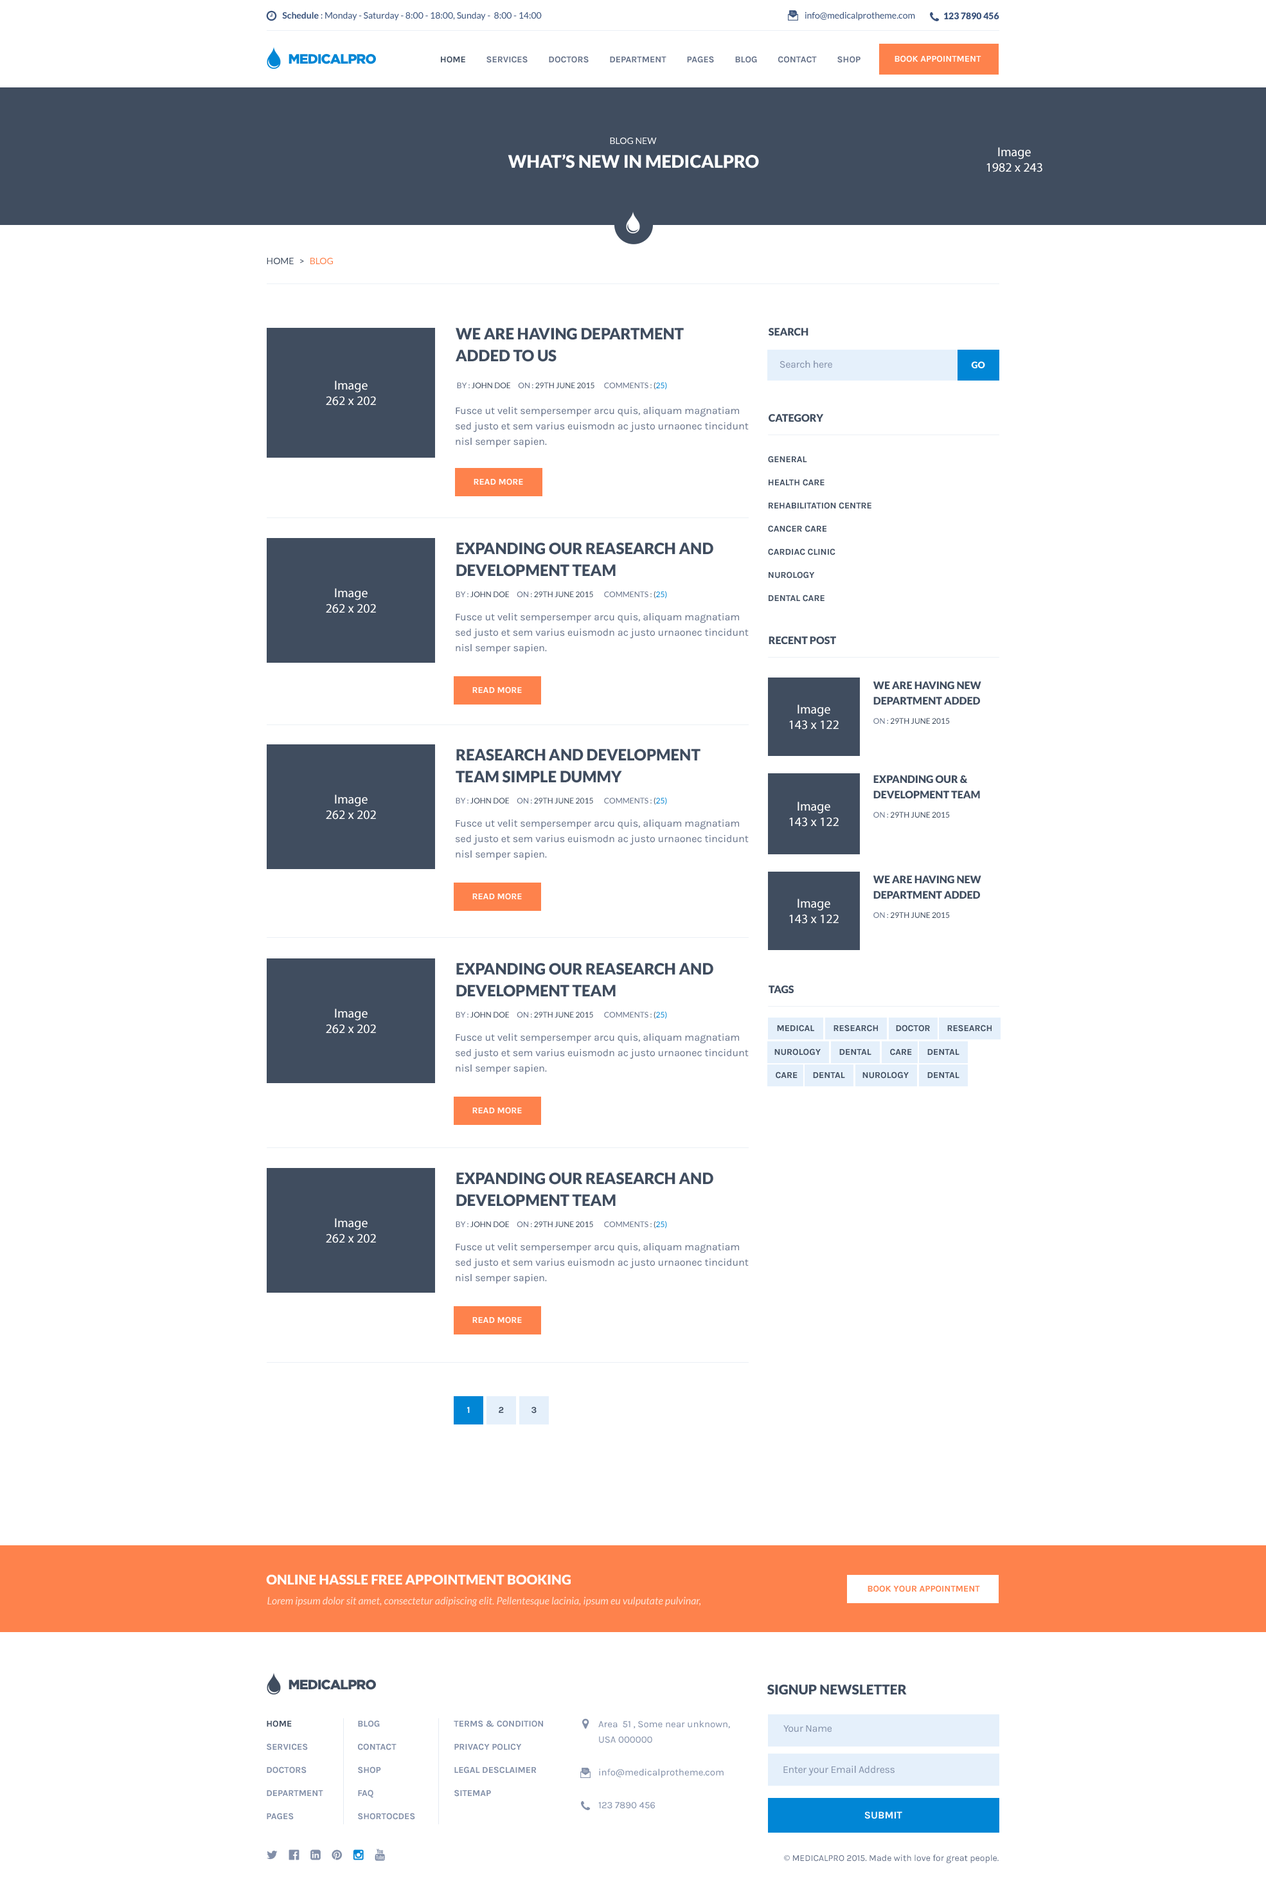
<style>
.page{position:relative;width:1266px;height:1904px;background:#ffffff}
.page>*{position:absolute;margin:0}
.t1{font:9px "Lato-Regular";color:#39527b}
.t2{font:9px "Lato-Bold";color:#39527b}
.t3{font:9px "Lato-Black";color:#39527b;text-transform:uppercase}
.t4{font:13.5px "Gotham-Black";letter-spacing:-0.05em;color:#0186d5;text-transform:uppercase}
.t5{font:9px "Karla-Bold";color:#657188;text-transform:uppercase}
.t6{font:9px "Karla-Bold";color:#404d5f;text-transform:uppercase}
.t7{font:9px "Karla-Bold";color:#ffffff;text-transform:uppercase}
.t8{font:9px "Lato-Regular";color:#ffffff;text-transform:uppercase}
.t9{font:12.9px "MyriadPro-Regular";color:#ffffff}
.t10{font:17.4px "Lato-Black";color:#ffffff;text-transform:uppercase}
.t11{font:9px "Lato-Regular";color:#404d5f;text-transform:uppercase}
.t12{font:9px "Lato-Regular";color:#fe824c;text-transform:uppercase}
.t13{font:15.4px/21.9px "Lato-Black";color:#404d5f;text-transform:uppercase}
.t14{font:10.3px "Lato-Black";color:#404d5f;text-transform:uppercase}
.t15{font:10.3px "Karla-Regular";letter-spacing:-0.025em;color:#828fa8}
.t16{font:9px "Lato-Black";color:#ffffff;text-transform:uppercase}
.t17{font:7.7px "Lato-Regular";color:#404d5f;text-transform:uppercase}
.t18{font:7.7px "Lato-Regular";color:#657188;text-transform:uppercase}
.t19{font:7.7px "Lato-Regular";color:#0385d2;text-transform:uppercase}
.t20{font:10.3px/15.4px "Karla-Regular";color:#657188}
.t21{font:9px/23.1px "Karla-Bold";color:#404d5f;text-transform:uppercase}
.t22{font:10.3px/15.4px "Lato-Black";color:#404d5f;text-transform:uppercase}
.t23{font:13.5px "Lato-Black";color:#ffffff;text-transform:uppercase}
.t24{font:9px "Karla-Bold";color:#fe824c;text-transform:uppercase}
.t25{font:10.3px "Lato-Italic";color:#ffe2d5}
.t26{font:13.5px "Gotham-Black";letter-spacing:-0.05em;color:#404d5f;text-transform:uppercase}
.t27{font:13.5px "Lato-Black";color:#404d5f;text-transform:uppercase}
.t28{font:9px/23.1px "Karla-Bold";color:#828fa8;text-transform:uppercase}
.t29{font:9.6px/15.4px "Karla-Regular";color:#828fa8}
.t30{font:9.6px "Karla-Regular";color:#828fa8}
.t31{font:9.6px "Karla-Regular";color:#828fa8;text-transform:uppercase}
.t32{font:10.3px "Karla-Bold";color:#ffffff;text-transform:uppercase}
.t33{font:9px "Karla-Regular";color:#657188}
.t34{font:9px "MyriadPro-Regular";color:#657188}
</style>
<div class="page">
<p class="t1" style="left:282px;top:12px;width:260px;height:9px"><span class="t2">Schedule</span> : Monday - Saturday - 8:00 - 18:00, Sunday -  8:00 - 14:00</p>
<p class="t1" style="left:806px;top:12px;width:109px;height:9px">info@medicalprotheme.com</p>
<p class="t3" style="left:944px;top:12px;width:56px;height:7px">123 7890 456</p>
<p class="t4" style="left:289px;top:54px;width:87px;height:10px">MEDICALPRO</p>
<p class="t5" style="left:441px;top:56px;width:420px;height:7px"><span class="t6">Home</span>         Services         Doctors         DEPARTMENT         Pages         Blog         Contact         Shop</p>
<p class="t7" style="left:895px;top:55px;width:87px;height:7px">BOOK APPOINTMENT</p>
<p class="t8" style="left:610px;top:138px;width:47px;height:6px">blog new</p>
<p class="t9" style="left:987px;top:147px;width:56px;height:25px;text-align:center">Image<br>1982 x 243</p>
<p class="t10" style="left:508px;top:154px;width:251px;height:14px">What’s new in medicalpro</p>
<p class="t11" style="left:267px;top:258px;width:66px;height:6px">home   &gt;   <span class="t12">blog</span></p>
<p class="t13" style="left:456px;top:328px;width:228px;height:34px">We are having department<br>added to us</p>
<p class="t14" style="left:769px;top:328px;width:40px;height:8px">search</p>
<p class="t15" style="left:780px;top:361px;width:53px;height:7px">Search here</p>
<p class="t16" style="left:971px;top:361px;width:15px;height:7px">go</p>
<p class="t9" style="left:326px;top:381px;width:50px;height:25px;text-align:center">Image<br>262 x 202</p>
<p class="t17" style="left:457px;top:382px;width:138px;height:6px"><span class="t18">By :</span> John Doe     <span class="t18">on :</span> 29th June 2015</p>
<p class="t18" style="left:604px;top:382px;width:63px;height:8px">comments :<span class="t17"> (</span><span class="t19">25)</span></p>
<p class="t20" style="left:456px;top:407px;width:293px;height:40px">Fusce ut velit sempersemper arcu quis, aliquam magnatiam sed justo et sem varius euismodn ac justo urnaonec tincidunt nisl semper sapien.</p>
<p class="t14" style="left:769px;top:414px;width:55px;height:8px">category</p>
<p class="t21" style="left:768px;top:456px;width:104px;height:146px">General <br>Health Care<br>Rehabilitation Centre<br>Cancer Care<br>Cardiac Clinic<br>Nurology<br>Dental Care</p>
<p class="t7" style="left:474px;top:478px;width:49px;height:7px">read more</p>
<p class="t13" style="left:456px;top:543px;width:258px;height:34px">EXPANDING our Reasearch and<br>Development team</p>
<p class="t9" style="left:326px;top:588px;width:50px;height:25px;text-align:center">Image<br>262 x 202</p>
<p class="t17" style="left:456px;top:591px;width:137px;height:6px"><span class="t18">By :</span> John Doe     <span class="t18">on :</span> 29th June 2015</p>
<p class="t18" style="left:604px;top:591px;width:63px;height:7px">comments :<span class="t17"> (</span><span class="t19">25)</span></p>
<p class="t20" style="left:456px;top:613px;width:293px;height:41px">Fusce ut velit sempersemper arcu quis, aliquam magnatiam sed justo et sem varius euismodn ac justo urnaonec tincidunt nisl semper sapien.</p>
<p class="t14" style="left:769px;top:636px;width:67px;height:8px">recent post</p>
<p class="t7" style="left:473px;top:687px;width:49px;height:7px">read more</p>
<p class="t22" style="left:873px;top:681px;width:109px;height:24px">We are having new <br>department added</p>
<p class="t9" style="left:789px;top:705px;width:50px;height:25px;text-align:center">Image<br>143 x 122</p>
<p class="t17" style="left:874px;top:718px;width:76px;height:6px"><span class="t18">on :</span> 29th June 2015</p>
<p class="t13" style="left:456px;top:749px;width:245px;height:34px">Reasearch and Development <br>team simple dummy</p>
<p class="t22" style="left:874px;top:775px;width:106px;height:23px">EXPANDING our &amp;<br>Development team</p>
<p class="t9" style="left:326px;top:795px;width:50px;height:25px;text-align:center">Image<br>262 x 202</p>
<p class="t17" style="left:456px;top:798px;width:137px;height:6px"><span class="t18">By :</span> John Doe     <span class="t18">on :</span> 29th June 2015</p>
<p class="t18" style="left:604px;top:797px;width:63px;height:8px">comments :<span class="t17"> (</span><span class="t19">25)</span></p>
<p class="t9" style="left:789px;top:802px;width:50px;height:25px;text-align:center">Image<br>143 x 122</p>
<p class="t20" style="left:456px;top:820px;width:293px;height:40px">Fusce ut velit sempersemper arcu quis, aliquam magnatiam sed justo et sem varius euismodn ac justo urnaonec tincidunt nisl semper sapien.</p>
<p class="t17" style="left:874px;top:812px;width:76px;height:6px"><span class="t18">on :</span> 29th June 2015</p>
<p class="t22" style="left:873px;top:876px;width:109px;height:23px">We are having new <br>department added</p>
<p class="t7" style="left:473px;top:893px;width:49px;height:7px">read more</p>
<p class="t9" style="left:789px;top:899px;width:50px;height:25px;text-align:center">Image<br>143 x 122</p>
<p class="t17" style="left:874px;top:912px;width:76px;height:6px"><span class="t18">on :</span> 29th June 2015</p>
<p class="t13" style="left:456px;top:963px;width:258px;height:34px">EXPANDING our Reasearch and<br>Development team</p>
<p class="t14" style="left:769px;top:986px;width:25px;height:7px">tags</p>
<p class="t9" style="left:326px;top:1009px;width:50px;height:25px;text-align:center">Image<br>262 x 202</p>
<p class="t17" style="left:456px;top:1012px;width:137px;height:6px"><span class="t18">By :</span> John Doe     <span class="t18">on :</span> 29th June 2015</p>
<p class="t18" style="left:604px;top:1011px;width:63px;height:8px">comments :<span class="t17"> (</span><span class="t19">25)</span></p>
<p class="t6" style="left:777px;top:1025px;width:38px;height:7px">medical</p>
<p class="t6" style="left:834px;top:1025px;width:44px;height:7px">research</p>
<p class="t6" style="left:896px;top:1025px;width:34px;height:7px">doctor</p>
<p class="t6" style="left:948px;top:1025px;width:44px;height:7px">research</p>
<p class="t20" style="left:456px;top:1034px;width:293px;height:40px">Fusce ut velit sempersemper arcu quis, aliquam magnatiam sed justo et sem varius euismodn ac justo urnaonec tincidunt nisl semper sapien.</p>
<p class="t6" style="left:775px;top:1048px;width:46px;height:8px">Nurology</p>
<p class="t6" style="left:840px;top:1049px;width:32px;height:6px">Dental</p>
<p class="t6" style="left:890px;top:1048px;width:22px;height:8px">care</p>
<p class="t6" style="left:928px;top:1049px;width:32px;height:6px">Dental</p>
<p class="t6" style="left:776px;top:1072px;width:22px;height:7px">care</p>
<p class="t6" style="left:813px;top:1072px;width:32px;height:6px">Dental</p>
<p class="t6" style="left:863px;top:1072px;width:46px;height:7px">Nurology</p>
<p class="t6" style="left:928px;top:1072px;width:32px;height:6px">Dental</p>
<p class="t7" style="left:473px;top:1107px;width:49px;height:7px">read more</p>
<p class="t13" style="left:456px;top:1173px;width:258px;height:34px">EXPANDING our Reasearch and<br>Development team</p>
<p class="t9" style="left:326px;top:1218px;width:50px;height:25px;text-align:center">Image<br>262 x 202</p>
<p class="t17" style="left:456px;top:1221px;width:137px;height:6px"><span class="t18">By :</span> John Doe     <span class="t18">on :</span> 29th June 2015</p>
<p class="t18" style="left:604px;top:1221px;width:63px;height:7px">comments :<span class="t17"> (</span><span class="t19">25)</span></p>
<p class="t20" style="left:456px;top:1243px;width:293px;height:41px">Fusce ut velit sempersemper arcu quis, aliquam magnatiam sed justo et sem varius euismodn ac justo urnaonec tincidunt nisl semper sapien.</p>
<p class="t7" style="left:473px;top:1317px;width:49px;height:7px">read more</p>
<p class="t7" style="left:467px;top:1407px;width:3px;height:6px">1</p>
<p class="t6" style="left:499px;top:1407px;width:5px;height:6px">2</p>
<p class="t6" style="left:532px;top:1407px;width:5px;height:7px">3</p>
<p class="t23" style="left:266px;top:1574px;width:305px;height:11px">ONLINE HASSLE FREE Appointment BOOKING</p>
<p class="t24" style="left:868px;top:1585px;width:112px;height:7px">BOOK YOUR APPOINTMENT</p>
<p class="t25" style="left:267px;top:1597px;width:434px;height:10px">Lorem ipsum dolor sit amet, consectetur adipiscing elit. Pellentesque lacinia, ipsum eu vulputate pulvinar,</p>
<p class="t26" style="left:289px;top:1680px;width:87px;height:10px">MEDICALPRO</p>
<p class="t27" style="left:768px;top:1684px;width:139px;height:11px">SIGNUP NEWSLETTER</p>
<p class="t28" style="left:267px;top:1720px;width:56px;height:100px"><span class="t21">Home<br></span>Services<br>Doctors<br>DEPARTMENT<br>Pages</p>
<p class="t28" style="left:358px;top:1720px;width:57px;height:100px">Blog<br>Contact<br>Shop<br>faq<br>shortocdes</p>
<p class="t28" style="left:454px;top:1720px;width:89px;height:77px">TERms &amp; Condition<br>Privacy policy<br>Legal desclaimer<br>sitemap</p>
<p class="t29" style="left:598px;top:1720px;width:132px;height:23px">Area  51 , Some near unknown, <br>USA 000000</p>
<p class="t15" style="left:784px;top:1725px;width:48px;height:8px">Your Name</p>
<p class="t30" style="left:599px;top:1769px;width:125px;height:9px">info@medicalprotheme.com</p>
<p class="t15" style="left:784px;top:1766px;width:111px;height:10px">Enter your Email Address</p>
<p class="t31" style="left:598px;top:1802px;width:57px;height:7px">123 7890 456</p>
<p class="t32" style="left:865px;top:1812px;width:38px;height:7px">submit</p>
<p class="t33" style="left:784px;top:1855px;width:215px;height:9px"><span class="t34">©</span> MEDICALPRO 2015. Made with love for great people.</p>
</div>
